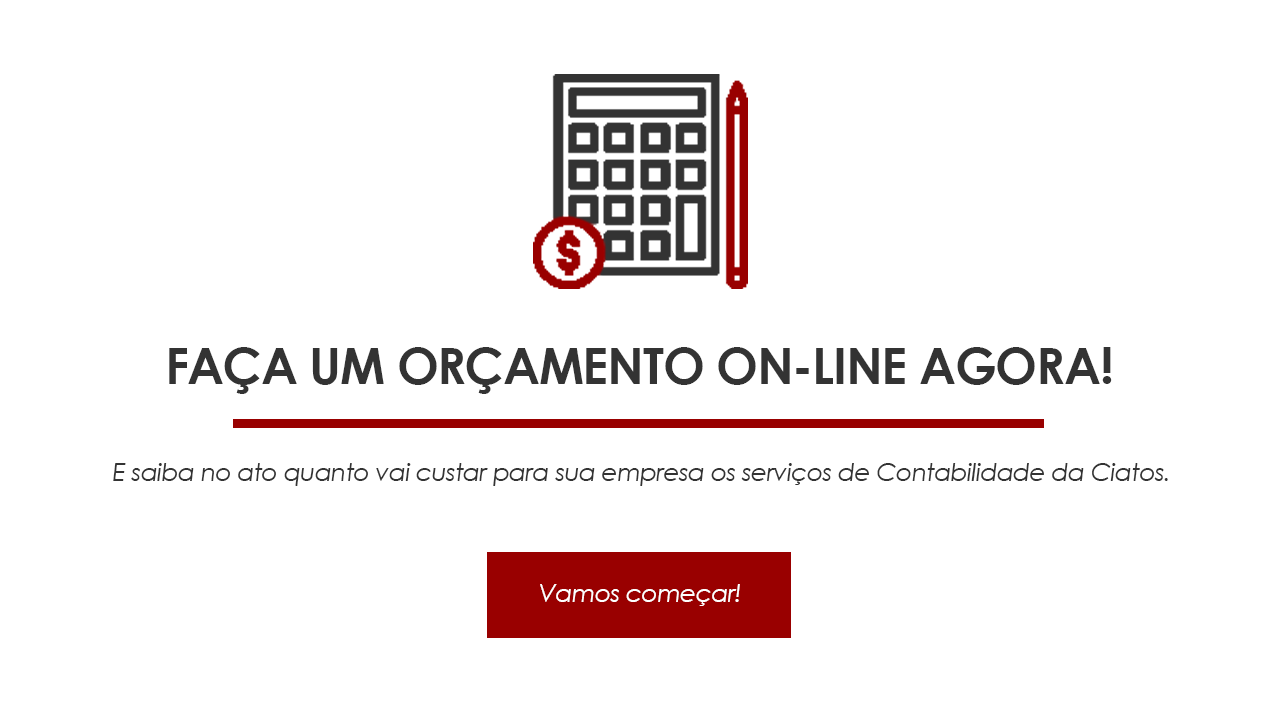
<style>
.page{position:relative;width:1280px;height:720px;background:#ffffff}
.page>*{position:absolute;margin:0}
.t1{font:50px "CenturyGothic-Bold";letter-spacing:-0.025em;color:#333333}
.t2{font:25px "CenturyGothic-Italic";letter-spacing:-0.025em;color:#333333}
.t3{font:25px "CenturyGothic-Italic";letter-spacing:-0.025em;color:#ffffff}
</style>
<div class="page">
<p class="t1" style="left:169px;top:347px;width:943px;height:47px">FAÇA UM ORÇAMENTO ON-LINE AGORA!</p>
<p class="t2" style="left:113px;top:463px;width:1055px;height:23px">E saiba no ato quanto vai custar para sua empresa os serviços de Contabilidade da Ciatos.</p>
<p class="t3" style="left:540px;top:584px;width:200px;height:22px">Vamos começar!</p>
</div>
